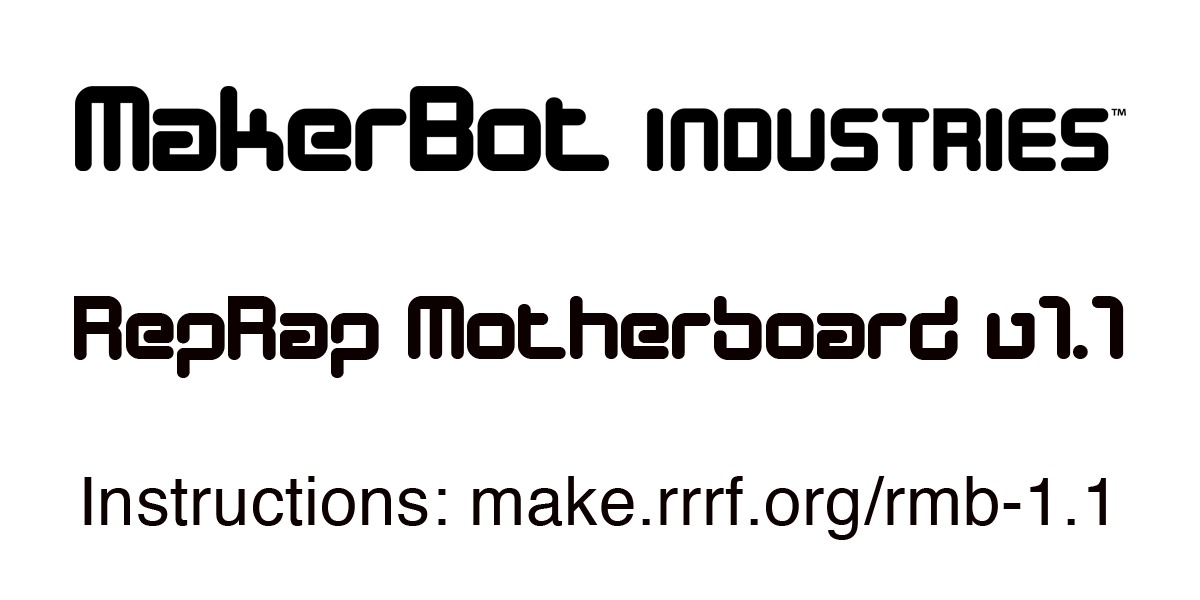
<style>
.page{position:relative;width:1200px;height:600px;background:#ffffff}
.page>*{position:absolute;margin:0}
.t1{font:92.5px "DesignerBlock";letter-spacing:0.01em;color:#0c0000}
.t2{font:67.4px "Helvetica";letter-spacing:0.01em;color:#0c0000}
</style>
<div class="page">
<p class="t1" style="left:74px;top:296px;width:1050px;height:82px">RepRap Motherboard v1.1</p>
<p class="t2" style="left:84px;top:476px;width:1022px;height:64px">Instructions: make.rrrf.org/rmb-1.1</p>
</div>
